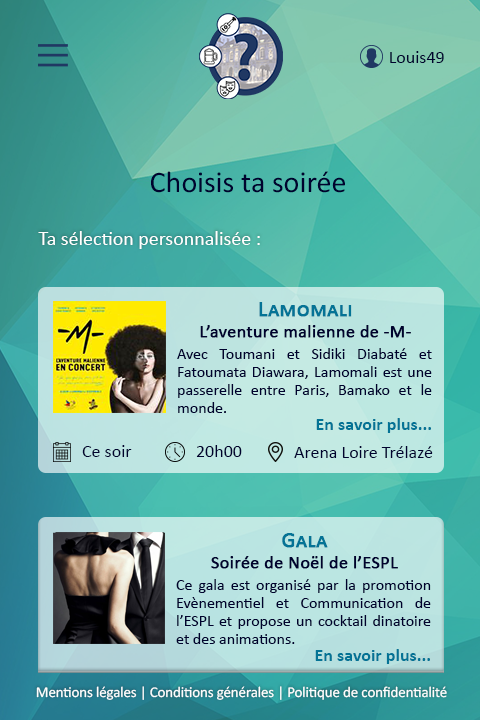
<style>
.page{position:relative;width:480px;height:720px}
.page>*{position:absolute;margin:0}
.t1{font:18px "Calibri";color:#00022e}
.t2{font:30px "Calibri";color:#00022e}
.t3{font:20px "Calibri";color:#ffffff}
.t4{font:18px "Calibri";color:#00022e;font-weight:bold}
.t5{font:22px "Calibri";color:#047395;font-variant:small-caps;font-weight:bold}
.t6{font:16px/18px "Calibri";color:#00022e}
.t7{font:18px "Calibri-Bold";color:#047395}
.t8{font:15px "Calibri";letter-spacing:-0.01em;color:#ffffff}
</style>
<div class="page">
<p class="t1" style="left:390px;top:51px;width:54px;height:12px">Louis49</p>
<p class="t2" style="left:151px;top:171px;width:194px;height:22px">Choisis ta soirée</p>
<p class="t3" style="left:38px;top:231px;width:222px;height:18px">Ta sélection personnalisée :</p>
<p class="t4" style="left:200px;top:302px;width:211px;height:36px;text-align:center"><span class="t5">Lamomali <br></span>L’aventure malienne de -M-</p>
<p class="t6" style="left:177px;top:348px;width:255px;height:65px;text-align:justify">Avec Toumani et Sidiki Diabaté et Fatoumata Diawara, Lamomali est une passerelle entre Paris, Bamako et le monde.</p>
<p class="t7" style="left:316px;top:418px;width:115px;height:15px">En savoir plus...</p>
<p class="t1" style="left:82px;top:445px;width:50px;height:12px">Ce soir</p>
<p class="t1" style="left:196px;top:445px;width:46px;height:12px">20h00</p>
<p class="t1" style="left:294px;top:446px;width:139px;height:12px">Arena Loire Trélazé</p>
<p class="t4" style="left:211px;top:533px;width:187px;height:36px;text-align:center"><span class="t5">Gala<br></span>Soirée de Noël de l’ESPL</p>
<p class="t6" style="left:176px;top:579px;width:255px;height:65px;text-align:justify">Ce gala est organisé par la promotion Evènementiel et Communication de l’ESPL et propose un cocktail dinatoire et des animations.</p>
<p class="t7" style="left:315px;top:649px;width:115px;height:15px">En savoir plus...</p>
<p class="t8" style="left:36px;top:686px;width:411px;height:14px">Mentions légales | Conditions générales | Politique de confidentialité</p>
</div>
